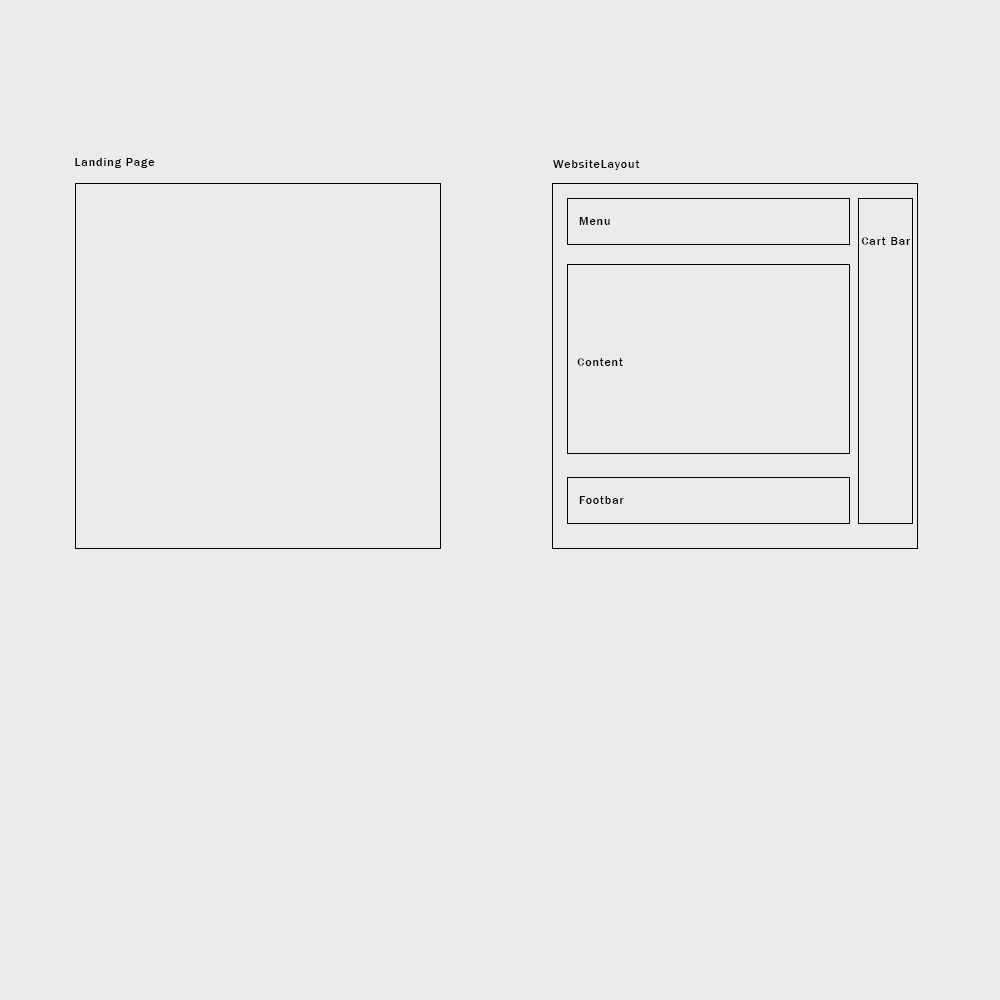
<style>
.page{position:relative;width:1000px;height:1000px;background:#ebebeb}
.page>*{position:absolute;margin:0}
.t1{font:12px "FranklinGothic-Medium";letter-spacing:0.075em;color:#000000}
</style>
<div class="page">
<p class="t1" style="left:75px;top:158px;width:80px;height:10px">Landing Page</p>
<p class="t1" style="left:553px;top:160px;width:87px;height:10px">WebsiteLayout</p>
<p class="t1" style="left:579px;top:217px;width:31px;height:8px">Menu</p>
<p class="t1" style="left:861px;top:237px;width:49px;height:8px">Cart Bar</p>
<p class="t1" style="left:577px;top:358px;width:46px;height:8px">Content</p>
<p class="t1" style="left:579px;top:496px;width:45px;height:8px">Footbar</p>
</div>
